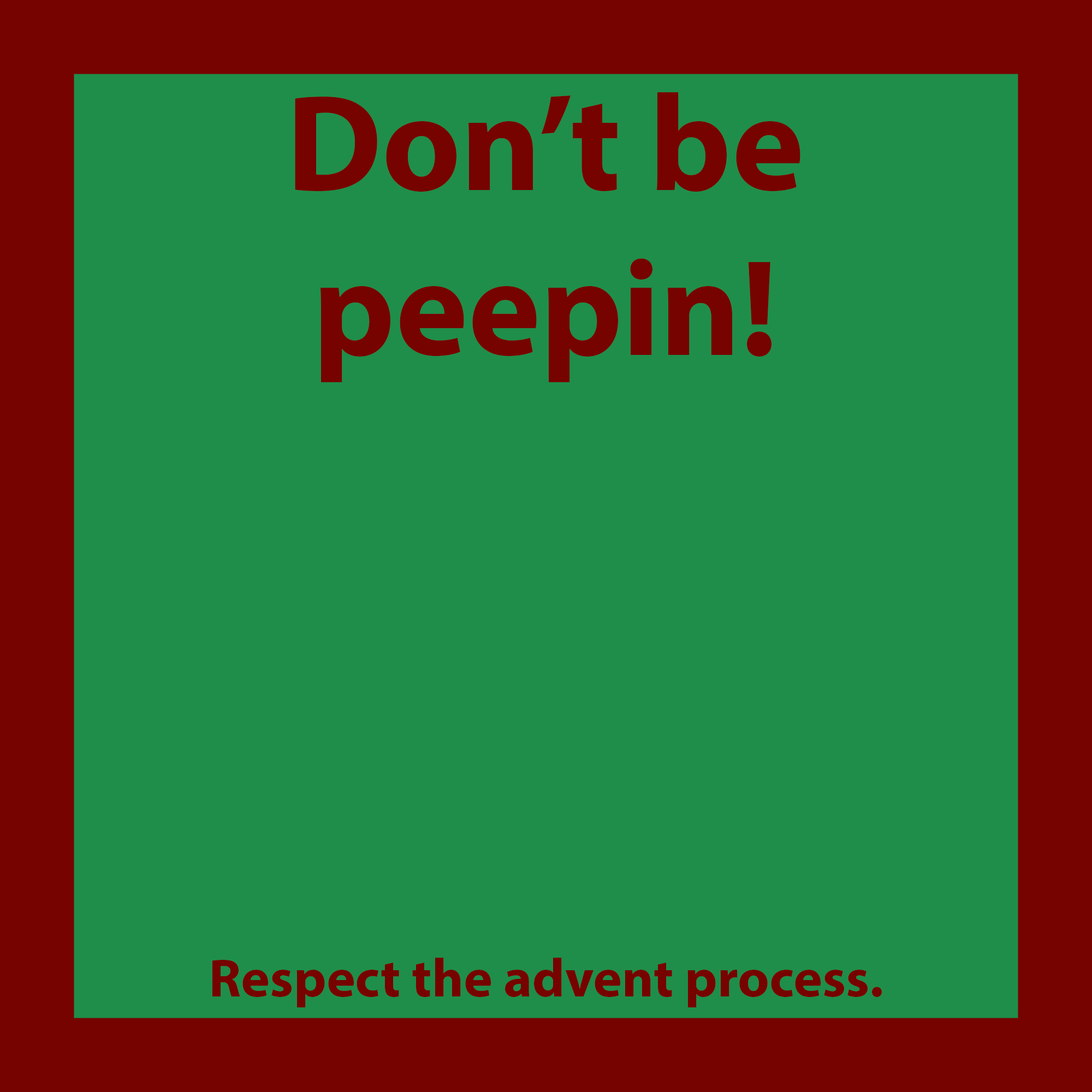
<style>
.page{position:relative;width:1092px;height:1092px;background:#1f8e4a}
.page>*{position:absolute;margin:0}
.t1{font:137.4px "MyriadPro-Bold";color:#760300}
.t2{font:54.6px "MyriadPro-Bold";color:#760300}
</style>
<div class="page">
<p class="t1" style="left:295px;top:92px;width:505px;height:290px;text-align:center">Don’t be peepin!</p>
<p class="t2" style="left:212px;top:958px;width:670px;height:49px">Respect the advent process.</p>
</div>
